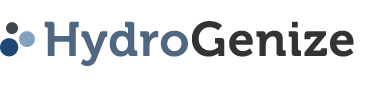
<style>
.page{position:relative;width:370px;height:95px;background:#ffffff}
.page>*{position:absolute;margin:0}
.t1{font:48px "Museo-700";letter-spacing:0.025em;color:#333333}
.t2{font:48px "Museo-700";letter-spacing:0.025em;color:#4f6881}
</style>
<div class="page">
<p class="t1" style="left:44px;top:21px;width:310px;height:45px"><span class="t2">Hydro</span>Genize</p>
</div>
